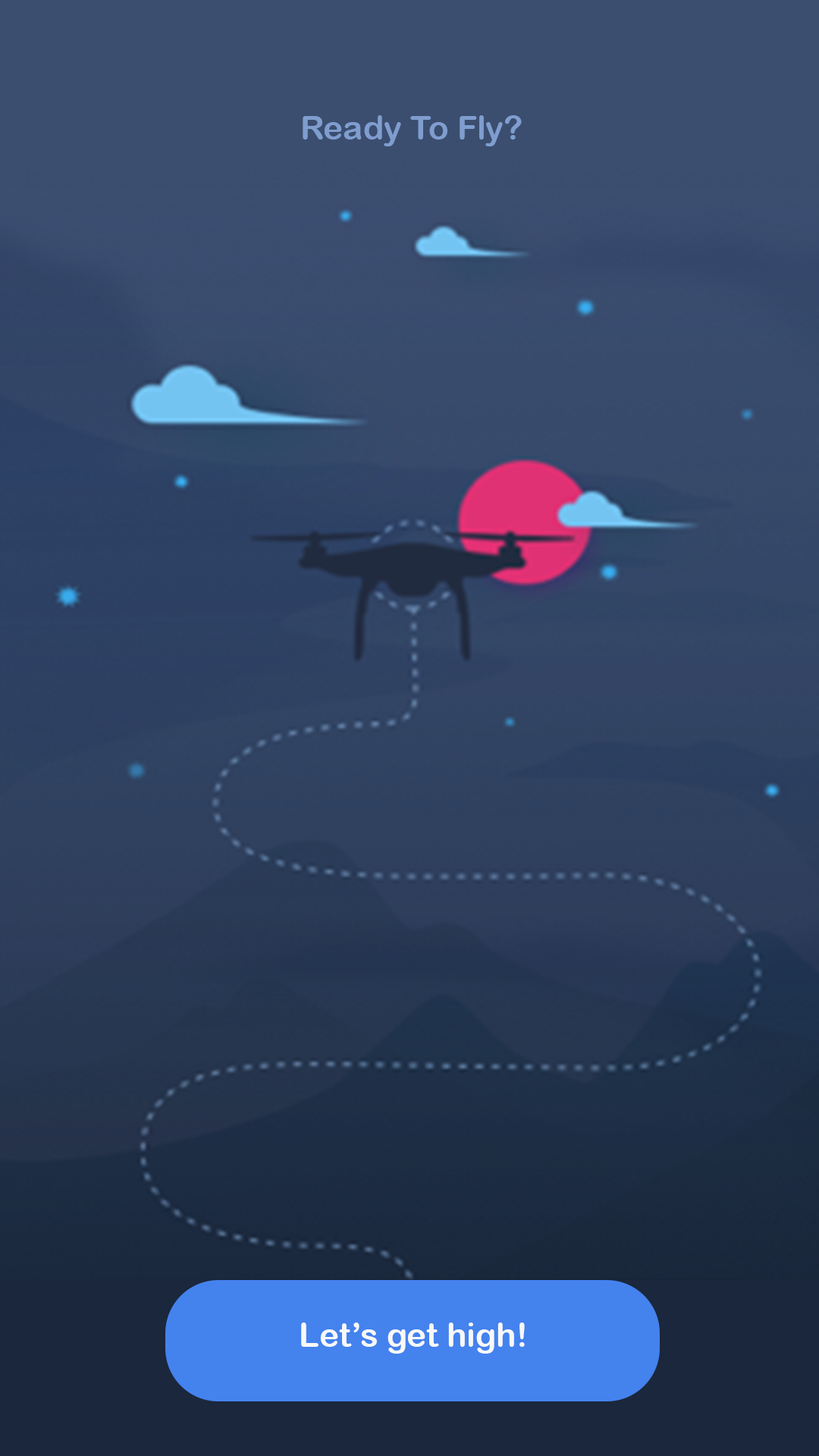
<style>
.page{position:relative;width:819px;height:1456px}
.page>*{position:absolute;margin:0}
.t1{font:33.2px "ArialRoundedMTBold";color:#7f9dcf}
.t2{font:33.2px "ArialRoundedMTBold";color:#f8f8f8}
</style>
<div class="page">
<p class="t1" style="left:303px;top:115px;width:219px;height:31px">Ready To Fly?</p>
<p class="t2" style="left:301px;top:1323px;width:224px;height:31px">Let’s get high!</p>
</div>
